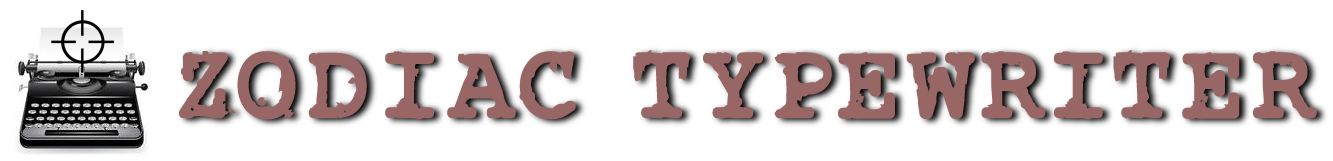
<style>
.page{position:relative;width:1333px;height:161px;background:#ffffff}
.page>*{position:absolute;margin:0}
.t1{font:112.1px "Rough_Typewriter-Bold";letter-spacing:0.039em;color:#996666}
</style>
<div class="page">
<p class="t1" style="left:179px;top:49px;width:1138px;height:71px">ZODIAC TYPEWRITER</p>
</div>
